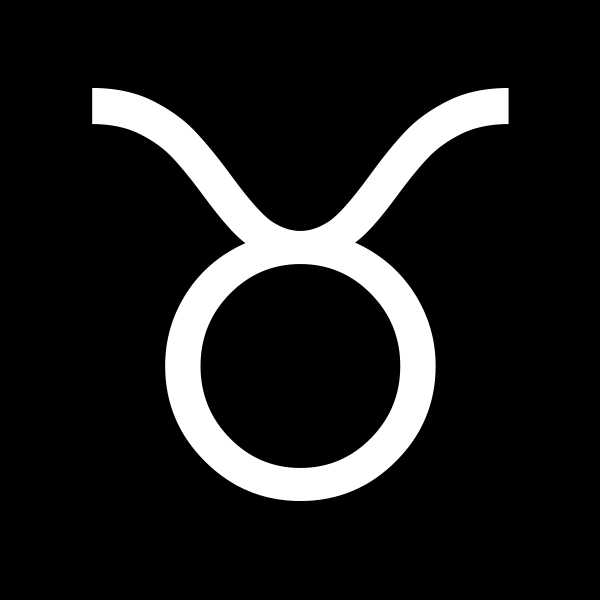
<style>
.page{position:relative;width:600px;height:600px;background:#000000}
.page>*{position:absolute;margin:0}
.t1{font:588px "ArialUnicodeMS";color:#ffffff}
</style>
<div class="page">
<p class="t1" style="left:92px;top:88px;width:417px;height:413px">♉︎</p>
</div>
